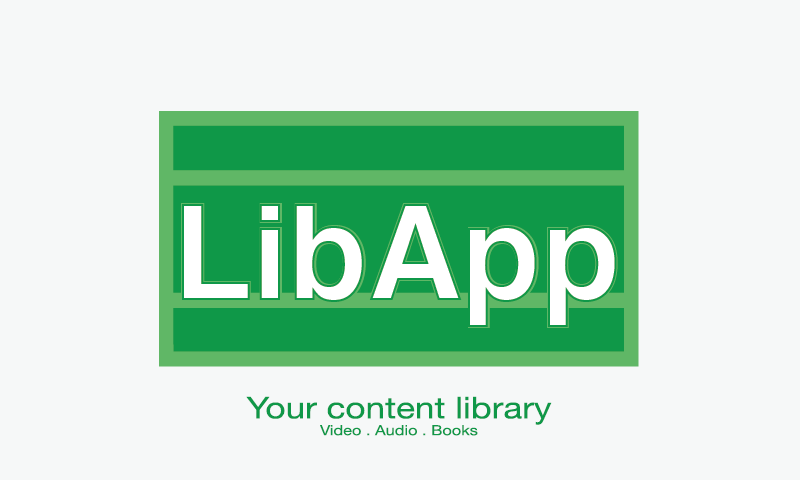
<style>
.page{position:relative;width:800px;height:480px;background:#f6f8f8}
.page>*{position:absolute;margin:0}
.t1{font:14px "HelveticaNeue";color:#0f9848;scale:1.17 1}
.t2{font:30px "HelveticaNeue";color:#0f9848;scale:1.17 1}
</style>
<div class="page">
<p class="t1" style="left:246px;top:396px;width:306px;height:40px;text-align:center"><span class="t2">Your content library<br></span>Video . Audio . Books</p>
</div>
